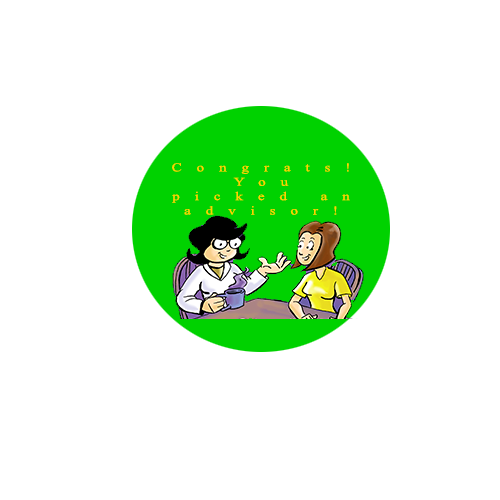
<style>
.page{position:relative;width:500px;height:500px;background:#ffffff}
.page>*{position:absolute;margin:0}
.t1{font:12px "TimesNewRomanPSMT";letter-spacing:0.985em;color:#ffd200;scale:1.26 1}
</style>
<div class="page">
<p class="t1" style="left:172px;top:163px;width:178px;height:52px;text-align:center">Congrats!<br>You picked an<br>advisor!</p>
</div>
